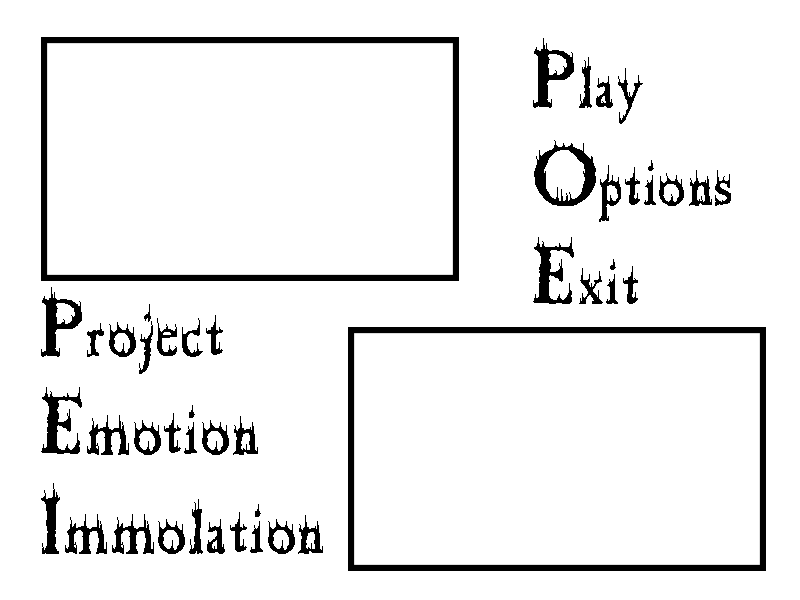
<style>
.page{position:relative;width:800px;height:600px;background:#ffffff}
.page>*{position:absolute;margin:0}
.t1{font:60px "CheapFire";color:#000000}
.t2{font:82px "CheapFire";color:#000000}
.t3{font:65px "CheapFire";color:#000000}
</style>
<div class="page">
<p class="t1" style="left:533px;top:38px;width:198px;height:266px"><span class="t2">P</span>lay<br><span class="t2">O</span>ptions<br><span class="t2">E</span>xit</p>
<p class="t3" style="left:41px;top:287px;width:282px;height:267px"><span class="t2">P</span>roject<br><span class="t2">E</span>motion<br><span class="t2">I</span>mmolation</p>
</div>
